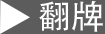
<style>
.page{position:relative;width:105px;height:34px;background:#5c5c5c}
.page>*{position:absolute;margin:0}
.t1{font:33.4px "AdobeHeitiStd-Regular";color:#ffffff}
</style>
<div class="page">
<p class="t1" style="left:39px;top:0px;width:64px;height:32px">翻牌</p>
</div>
